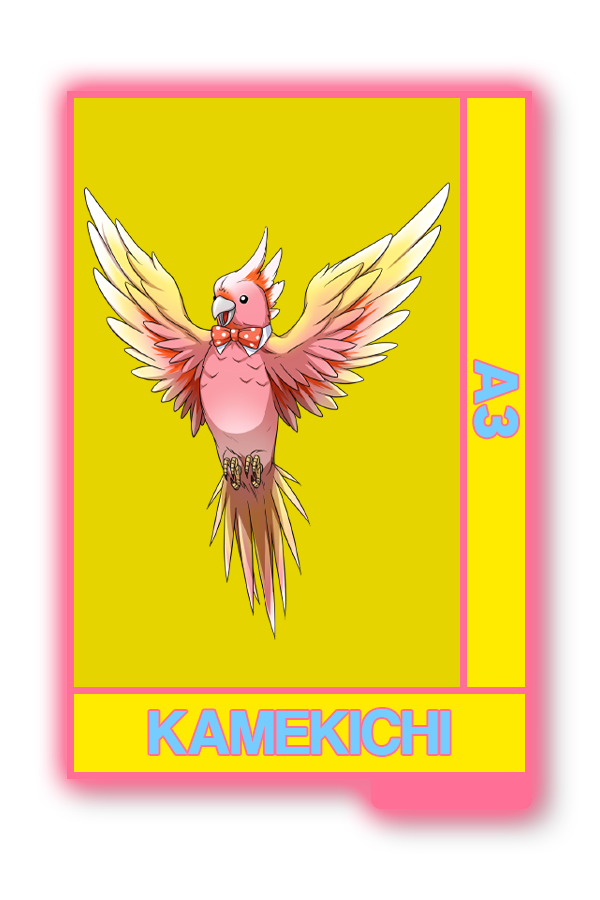
<style>
.page{position:relative;width:600px;height:900px;background:#e6d400}
.page>*{position:absolute;margin:0}
.t1{font:60.5px "MADETOMMY-Bold";color:#74ccff}
.t2{font:65.1px "CoolveticaRg-Regular";color:#74ccff}
</style>
<div class="page">
<p class="t1" style="left:474px;top:360px;width:44px;height:78px;rotate:90deg">A3</p>
<p class="t2" style="left:149px;top:709px;width:301px;height:46px">KAMEKICHI</p>
</div>
